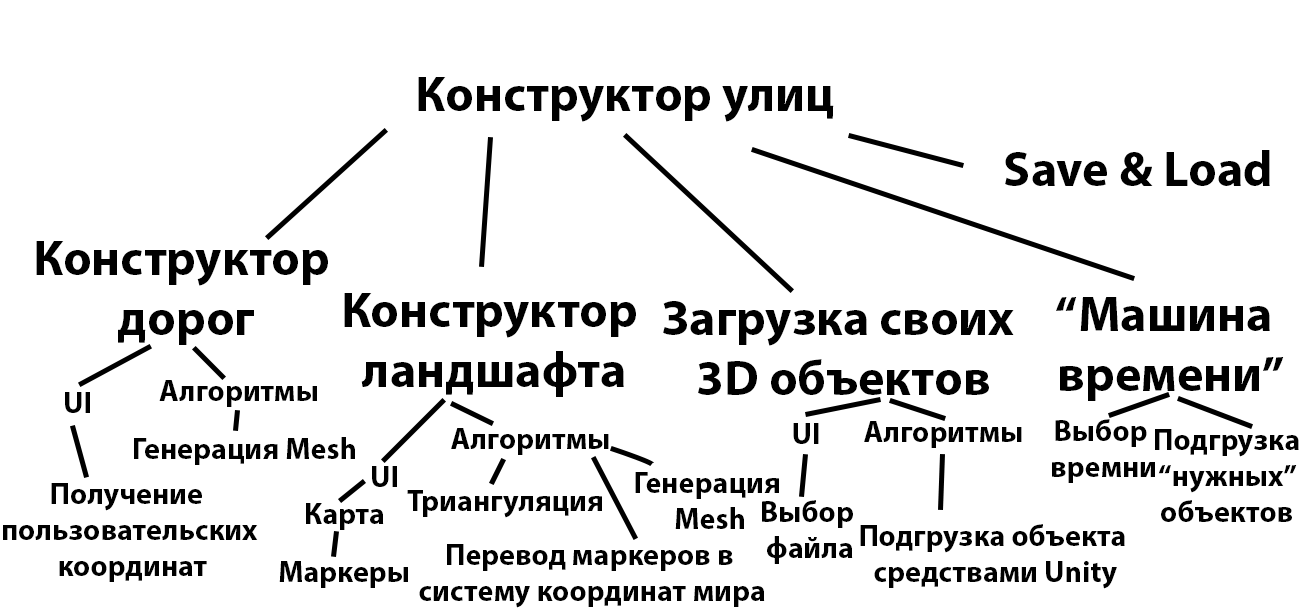
<style>
.page{position:relative;width:1300px;height:611px;background:#ffffff}
.page>*{position:absolute;margin:0}
.t1{font:50px "MyriadPro-Bold";color:#000000}
.t2{font:30px "MyriadPro-Bold";color:#000000}
</style>
<div class="page">
<p class="t1" style="left:418px;top:77px;width:416px;height:45px">Конструктор улиц</p>
<p class="t1" style="left:1005px;top:150px;width:265px;height:36px">Save &amp; Load</p>
<p class="t1" style="left:36px;top:241px;width:292px;height:104px;text-align:center">Конструктор <br>дорог</p>
<p class="t1" style="left:344px;top:293px;width:292px;height:104px;text-align:center">Конструктор <br>ландшафта</p>
<p class="t1" style="left:663px;top:301px;width:351px;height:94px;text-align:center">Загрузка своих <br>3D объектов</p>
<p class="t1" style="left:1056px;top:297px;width:228px;height:104px;text-align:center">“Машина<br> времени”</p>
<p class="t2" style="left:159px;top:380px;width:158px;height:27px">Алгоритмы</p>
<p class="t2" style="left:65px;top:392px;width:25px;height:21px">UI</p>
<p class="t2" style="left:793px;top:423px;width:26px;height:21px">UI</p>
<p class="t2" style="left:864px;top:421px;width:158px;height:27px">Алгоритмы</p>
<p class="t2" style="left:1052px;top:419px;width:103px;height:64px;text-align:center">Выбор <br>времни</p>
<p class="t2" style="left:134px;top:437px;width:221px;height:28px">Генерация Mesh</p>
<p class="t2" style="left:451px;top:428px;width:158px;height:27px">Алгоритмы</p>
<p class="t2" style="left:1155px;top:429px;width:144px;height:93px;text-align:center">Подгрузка<br>“нужных”<br>объектов</p>
<p class="t2" style="left:372px;top:466px;width:25px;height:21px">UI</p>
<p class="t2" style="left:635px;top:472px;width:144px;height:57px;text-align:center">Генерация<br> Mesh</p>
<p class="t2" style="left:3px;top:483px;width:255px;height:99px;text-align:center">Получение <br>пользовательских<br> координат</p>
<p class="t2" style="left:407px;top:490px;width:195px;height:28px">Триангуляция</p>
<p class="t2" style="left:306px;top:503px;width:78px;height:27px">Карта</p>
<p class="t2" style="left:762px;top:500px;width:91px;height:64px;text-align:center">Выбор<br> файла</p>
<p class="t2" style="left:860px;top:524px;width:265px;height:65px;text-align:center">Подгрузка объекта<br> средствами Unity</p>
<p class="t2" style="left:419px;top:544px;width:346px;height:64px;text-align:center">Перевод маркеров в <br>систему координат мира</p>
<p class="t2" style="left:279px;top:561px;width:129px;height:27px">Маркеры</p>
</div>
